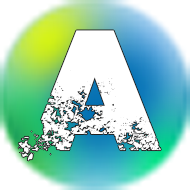
<style>
.page{position:relative;width:192px;height:192px;background:#ffffff}
.page>*{position:absolute;margin:0}
.t1{font:157.2px "C.A.Gatintas";color:#ffffff}
</style>
<div class="page">
<p class="t1" style="left:18px;top:30px;width:143px;height:131px">A</p>
</div>
